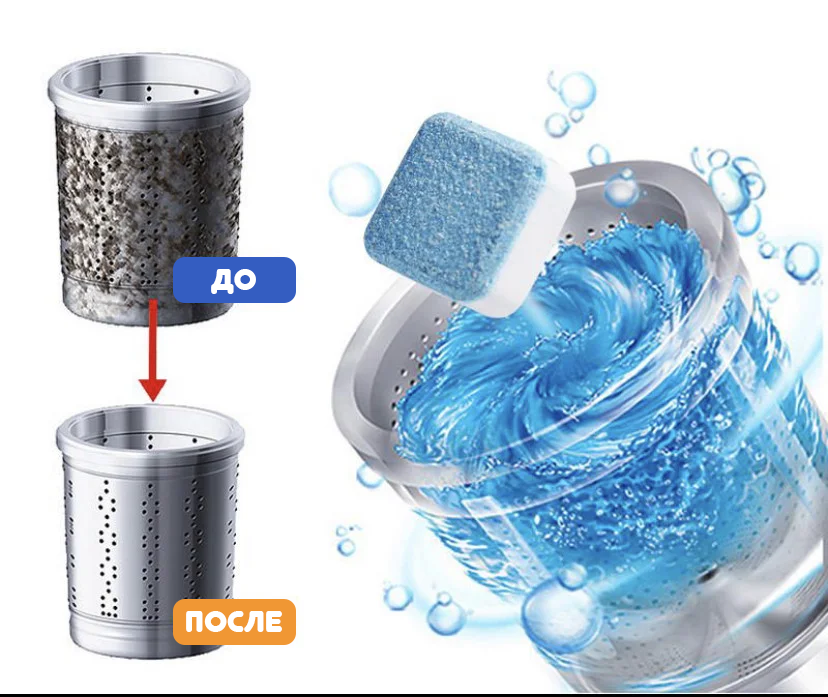
<style>
.page{position:relative;width:828px;height:697px;background:#ffffff}
.page>*{position:absolute;margin:0}
.t1{font:30px "Junegull-Regular";color:#ffffff;text-transform:uppercase}
</style>
<div class="page">
<p class="t1" style="left:211px;top:269px;width:45px;height:25px">До</p>
<p class="t1" style="left:186px;top:611px;width:96px;height:21px">ПОСЛЕ</p>
</div>
